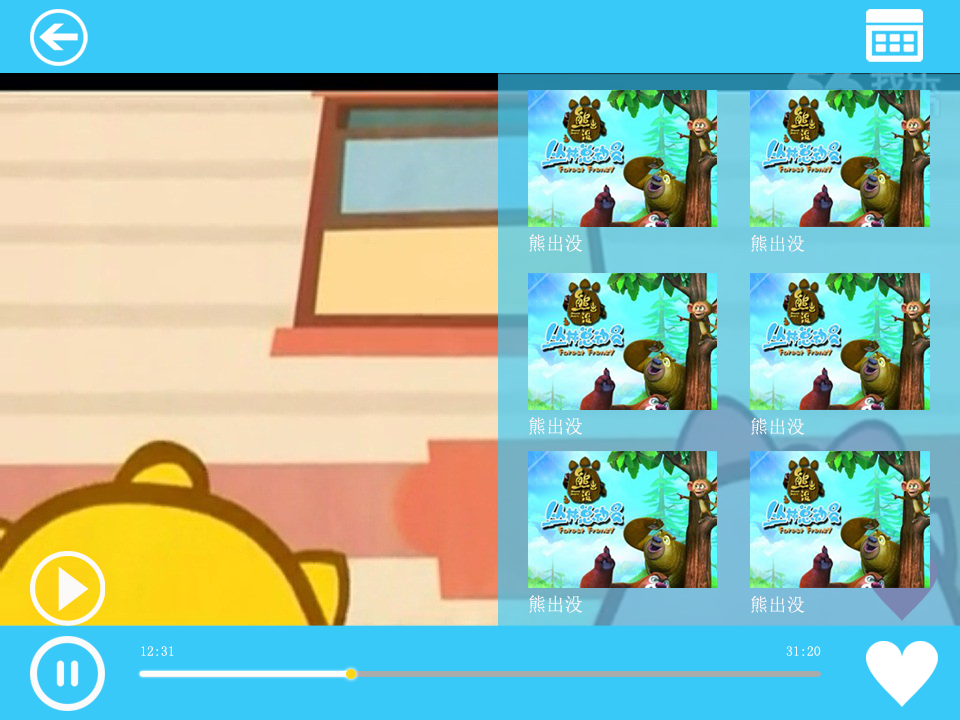
<style>
.page{position:relative;width:960px;height:720px}
.page>*{position:absolute;margin:0}
.t1{font:19px "SimSun";color:#f8f5f6;scale:0.96 1}
.t2{font:18.3px "SimSun";color:#f8f5f6}
.t3{font:13.9px "SimSun";color:#fafafa}
</style>
<div class="page">
<p class="t1" style="left:529px;top:234px;width:53px;height:18px">熊出没</p>
<p class="t2" style="left:751px;top:234px;width:54px;height:18px">熊出没</p>
<p class="t1" style="left:529px;top:417px;width:53px;height:18px">熊出没</p>
<p class="t2" style="left:751px;top:417px;width:54px;height:18px">熊出没</p>
<p class="t1" style="left:529px;top:595px;width:53px;height:18px">熊出没</p>
<p class="t2" style="left:751px;top:595px;width:54px;height:18px">熊出没</p>
<p class="t3" style="left:141px;top:646px;width:33px;height:10px">12:31</p>
<p class="t3" style="left:786px;top:646px;width:35px;height:10px">31:20</p>
</div>
